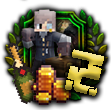
<style>
.page{position:relative;width:111px;height:110px}
.page>*{position:absolute;margin:0}
.t1{font:58.3px "MinecraftEvenings";letter-spacing:0.001em}
</style>
<div class="page">
<p class="t1" style="left:65px;top:49px;width:39px;height:47px;rotate:13deg">2</p>
</div>
